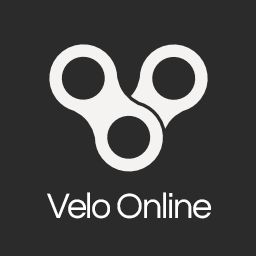
<style>
.page{position:relative;width:256px;height:256px;background:#2b2b2b}
.page>*{position:absolute;margin:0}
.t1{font:36.5px "Questrial-Regular";letter-spacing:-0.04em;color:#ffffff}
</style>
<div class="page">
<p class="t1" style="left:47px;top:192px;width:164px;height:27px">Velo Online</p>
</div>
